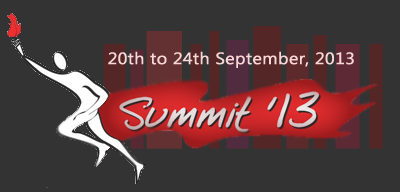
<style>
.page{position:relative;width:400px;height:192px;background:#333333}
.page>*{position:absolute;margin:0}
.t1{font:16.6px "Ebrima";color:#fad7d7;font-weight:bold;scale:1.07 1}
</style>
<div class="page">
<p class="t1" style="left:108px;top:51px;width:246px;height:17px">20th to 24th September, 2013</p>
</div>
